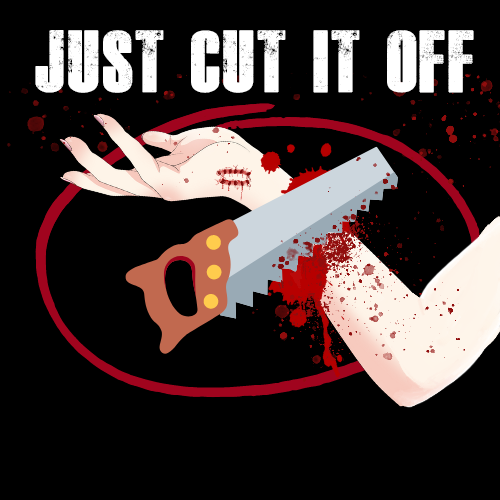
<style>
.page{position:relative;width:500px;height:500px;background:#000000}
.page>*{position:absolute;margin:0}
.t1{font:61.1px "DeadKansas";color:#ffffff;scale:0.93 1}
</style>
<div class="page">
<p class="t1" style="left:35px;top:30px;width:439px;height:63px">Just Cut It Off</p>
</div>
